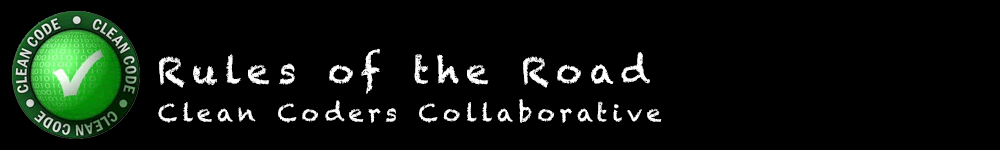
<style>
.page{position:relative;width:1000px;height:150px;background:#000000}
.page>*{position:absolute;margin:0}
.t1{font:36px "Chalkduster";letter-spacing:0.2em;color:#ffffff}
.t2{font:24px "Chalkduster";letter-spacing:0.2em;color:#ffffff}
</style>
<div class="page">
<p class="t1" style="left:159px;top:48px;width:491px;height:46px">Rules of the Road</p>
<p class="t2" style="left:158px;top:99px;width:504px;height:24px">Clean Coders Collaborative</p>
<p class="t2" style="left:158px;top:99px;width:504px;height:24px">Clean Coders Collaborative</p>
</div>
